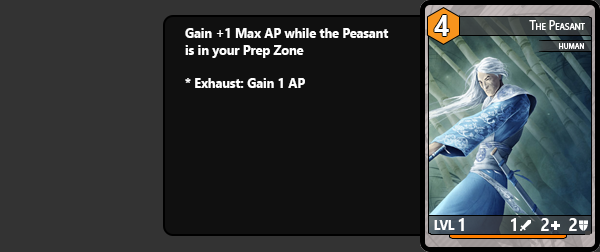
<style>
.page{position:relative;width:600px;height:252px;background:#101010}
.page>*{position:absolute;margin:0}
.t1{font:30px "SegoeUI-Bold";color:#ffffff;scale:0.9 1}
.t2{font:14px "SegoeUI-Bold";color:#ffffff;scale:0.9 1}
.t3{font:14px "MyriadPro-Regular";color:#ffffff;font-variant:small-caps;scale:0.9 1}
.t4{font:12px "MyriadPro-Regular";color:#ffffff;font-variant:small-caps;scale:0.9 1}
.t5{font:18px "SegoeUI-Bold";color:#ffffff;scale:0.9 1}
</style>
<div class="page">
<p class="t1" style="left:434px;top:15px;width:15px;height:21px">4</p>
<p class="t2" style="left:185px;top:28px;width:204px;height:60px">Gain +1 Max AP while the Peasant <br>is in your Prep Zone<br><br>* Exhaust: Gain 1 AP</p>
<p class="t3" style="left:529px;top:20px;width:56px;height:10px">The Peasant</p>
<p class="t4" style="left:559px;top:43px;width:25px;height:6px">human</p>
<p class="t2" style="left:434px;top:220px;width:21px;height:10px">LVL</p>
<p class="t5" style="left:458px;top:218px;width:6px;height:13px">1</p>
<p class="t5" style="left:511px;top:218px;width:5px;height:13px">1</p>
<p class="t5" style="left:541px;top:218px;width:8px;height:13px">2</p>
<p class="t5" style="left:569px;top:218px;width:8px;height:13px">2</p>
</div>
